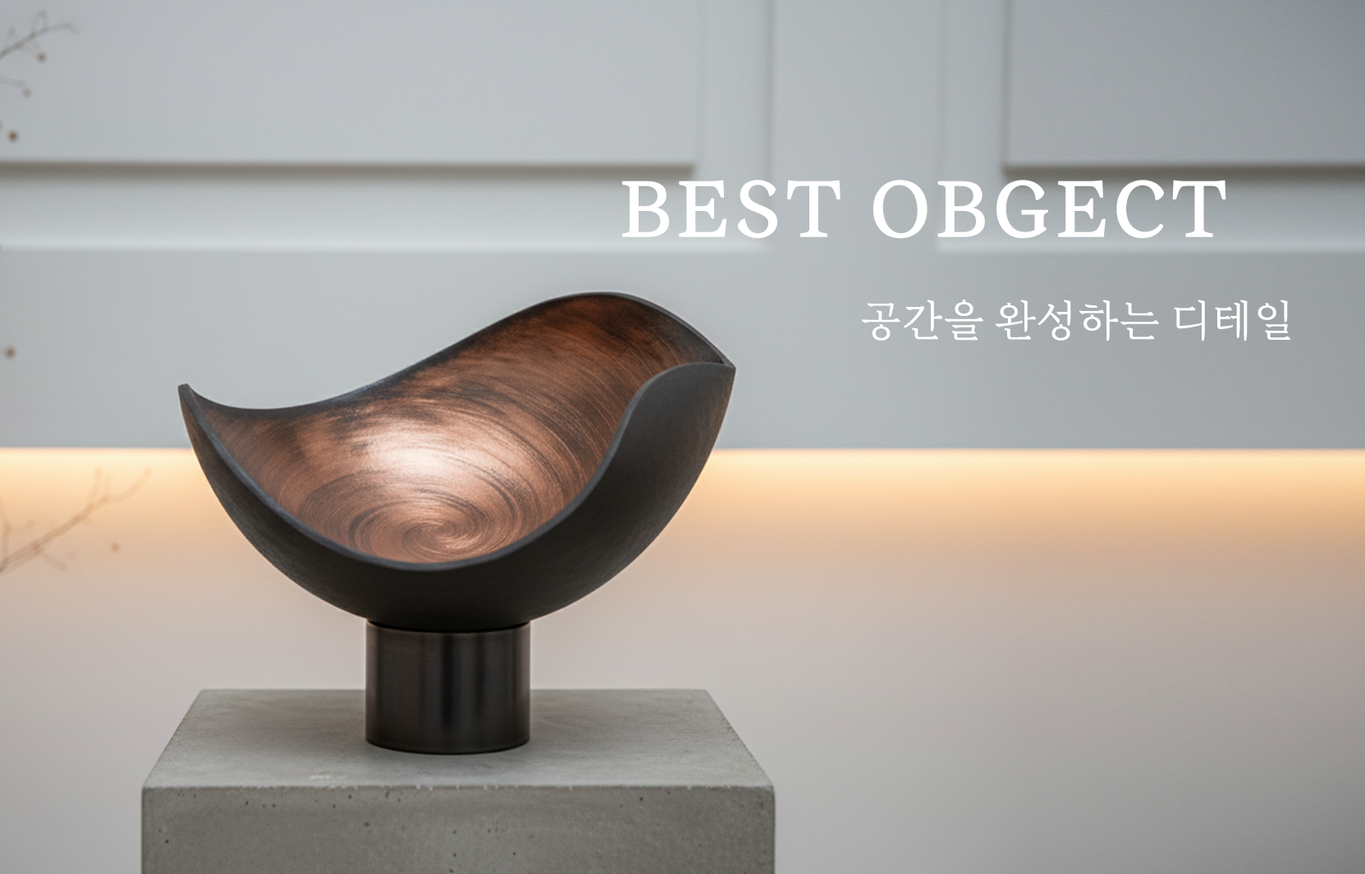
<style>
.page{position:relative;width:1365px;height:874px}
.page>*{position:absolute;margin:0}
.t1{font:82.1px "Eulyoo1945-SemiBold";letter-spacing:0.045em;color:#ffffff}
.t2{font:43.4px "Eulyoo1945-Regular";letter-spacing:-0.005em;color:#ffffff}
</style>
<div class="page">
<p class="t1" style="left:622px;top:180px;width:604px;height:59px">BEST OBGECT</p>
<p class="t2" style="left:861px;top:299px;width:429px;height:42px">공간을 완성하는 디테일</p>
</div>
